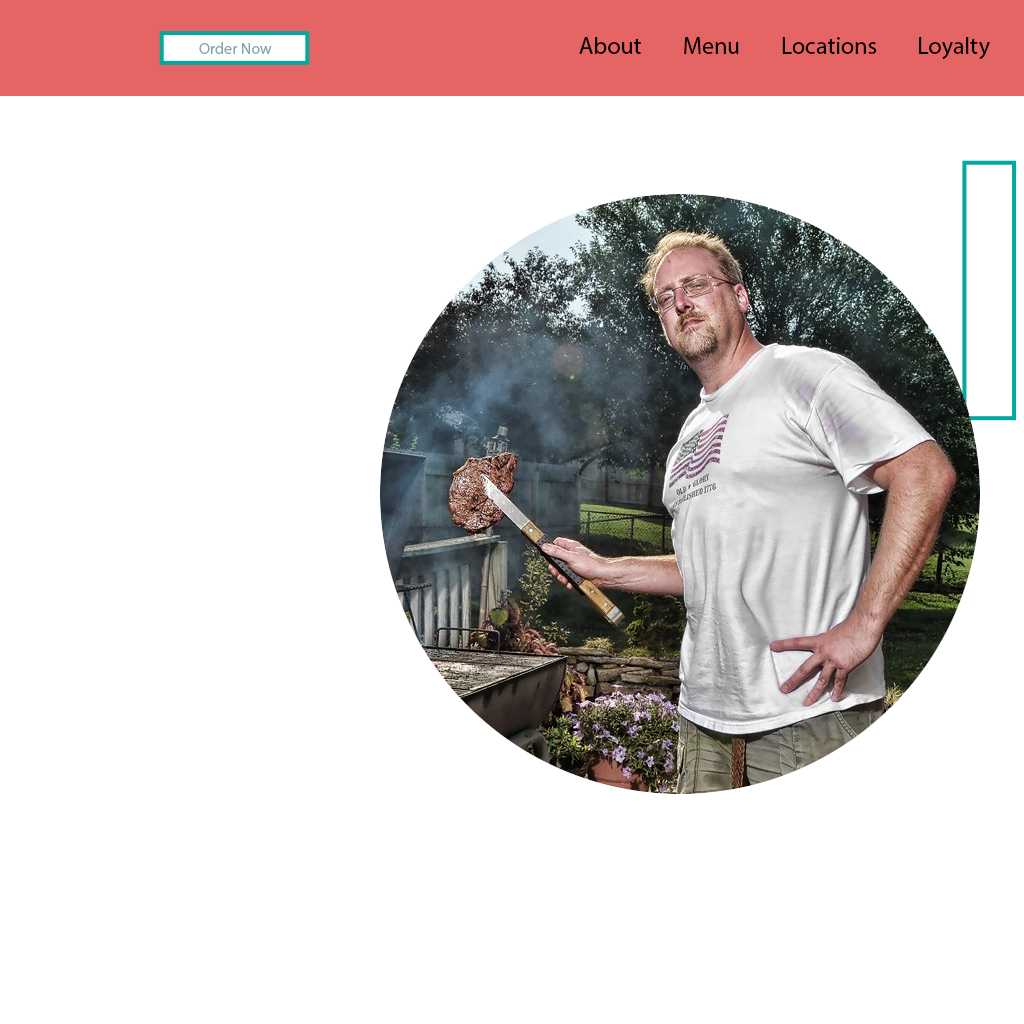
<style>
.page{position:relative;width:1024px;height:1024px;background:#ffffff}
.page>*{position:absolute;margin:0}
.t1{font:24px "MyriadPro-Regular";color:#000000}
.t2{font:16px "MyriadPro-Regular";color:#83a9a7}
</style>
<div class="page">
<p class="t1" style="left:579px;top:37px;width:411px;height:22px">About        Menu        Locations        Loyalty</p>
<p class="t2" style="left:199px;top:42px;width:73px;height:12px">Order Now</p>
</div>
